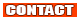
<style>
.page{position:relative;width:80px;height:20px;background:#ffffff}
.page>*{position:absolute;margin:0}
.t1{font:12.6px "Impact";color:#ffffff;scale:1.5 1}
</style>
<div class="page">
<p class="t1" style="left:6px;top:5px;width:68px;height:10px">CONTACT</p>
</div>
